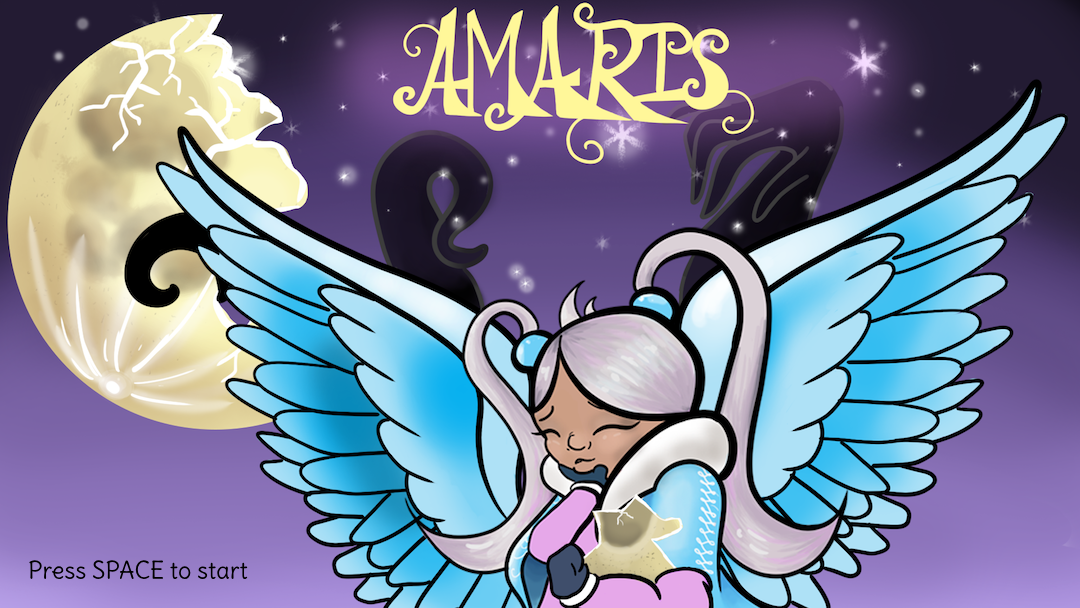
<style>
.page{position:relative;width:1080px;height:608px}
.page>*{position:absolute;margin:0}
.t1{font:24px "Delius-Regular";color:#000000}
</style>
<div class="page">
<p class="t1" style="left:29px;top:560px;width:219px;height:20px">Press SPACE to start</p>
</div>
